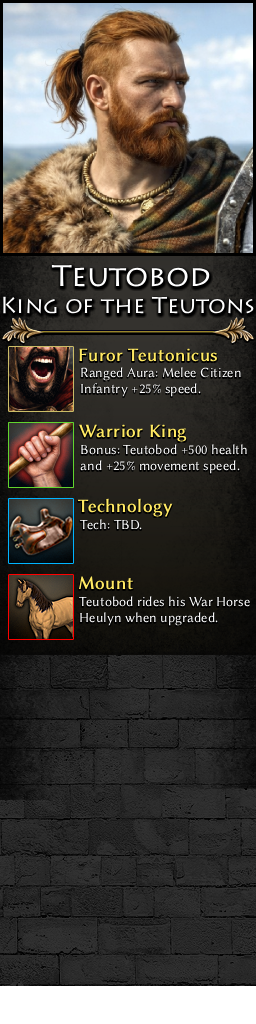
<style>
.page{position:relative;width:256px;height:1024px}
.page>*{position:absolute;margin:0}
.t1{font:23px/27px "Lithos";color:#ffffff}
.t2{font:30px/27px "Lithos";color:#ffffff}
.t3{font:19px "LinBiolinumO";color:#ffe963;font-weight:bold}
.t4{font:14px "LinBiolinumO";color:#ffffff}
</style>
<div class="page">
<p class="t1" style="left:3px;top:264px;width:251px;height:50px;text-align:center"><span class="t2">Teutobod<br></span>King of the Teutons</p>
<p class="t3" style="left:79px;top:348px;width:138px;height:14px">Furor Teutonicus</p>
<p class="t4" style="left:81px;top:367px;width:160px;height:30px">Ranged Aura: Melee Citizen <br>Infantry +25% speed.</p>
<p class="t3" style="left:79px;top:424px;width:108px;height:18px">Warrior King</p>
<p class="t4" style="left:80px;top:444px;width:167px;height:30px">Bonus: Teutobod +500 health <br>and +25% movement speed.</p>
<p class="t3" style="left:78px;top:498px;width:95px;height:19px">Technology</p>
<p class="t4" style="left:80px;top:519px;width:62px;height:11px">Tech: TBD.</p>
<p class="t3" style="left:78px;top:576px;width:55px;height:14px">Mount</p>
<p class="t4" style="left:79px;top:596px;width:171px;height:30px">Teutobod rides his War Horse<br>Heulyn when upgraded.</p>
</div>
